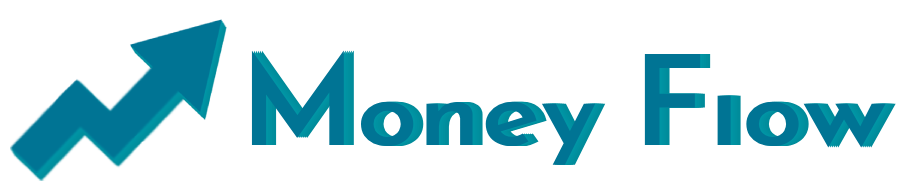
<style>
.page{position:relative;width:899px;height:191px;background:#ffffff}
.page>*{position:absolute;margin:0}
.t1{font:97.7px "JosefinSans-SemiBold";color:#007494;scale:1.14 1}
.t2{font:125px "JosefinSans-SemiBold";color:#007494}
.t3{font:67.7px "JosefinSans-SemiBold";color:#007494;scale:1.64 1}
.t4{font:97.7px "JosefinSans-SemiBold";color:#007494;scale:1.3 1}
</style>
<div class="page">
<p class="t1" style="left:251px;top:50px;width:635px;height:115px"><span class="t2">M</span>oney <span class="t2">F</span><span class="t3">I</span>o<span class="t4">w</span></p>
</div>
